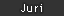
<style>
.page{position:relative;width:64px;height:16px;background:#333333}
.page>*{position:absolute;margin:0}
.t1{font:11px "TrebuchetMS";letter-spacing:0.1em;color:#ffffff}
</style>
<div class="page">
<p class="t1" style="left:21px;top:4px;width:21px;height:8px">Juri</p>
</div>
